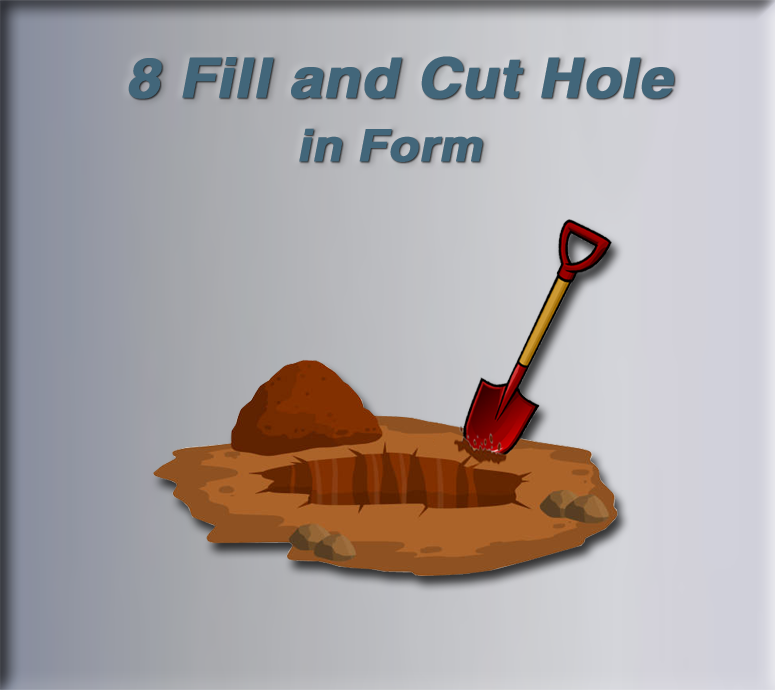
<style>
.page{position:relative;width:775px;height:690px}
.page>*{position:absolute;margin:0}
.t1{font:54.9px "HelveticaLTStd-Bold";color:#42667a;font-weight:bold;font-style:italic;scale:1.08 1}
.t2{font:44.6px "HelveticaLTStd-Bold";color:#42667a;font-weight:bold;font-style:italic;scale:1.08 1}
</style>
<div class="page">
<p class="t1" style="left:128px;top:56px;width:546px;height:43px">8 Fill and Cut Hole</p>
<p class="t2" style="left:299px;top:128px;width:184px;height:34px">in Form</p>
</div>
